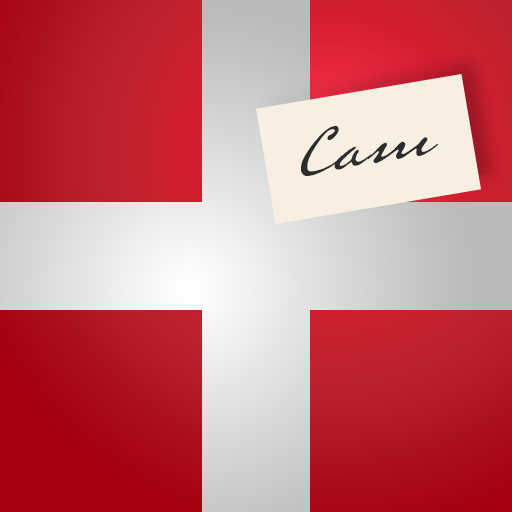
<style>
.page{position:relative;width:512px;height:512px}
.page>*{position:absolute;margin:0}
.t1{font:63px "AustinPen-Regular";color:#2c2c2e}
</style>
<div class="page">
<p class="t1" style="left:301px;top:126px;width:137px;height:50px;rotate:-10deg">Cam</p>
</div>
